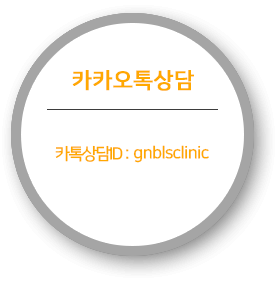
<style>
.page{position:relative;width:280px;height:284px;background:#ffffff}
.page>*{position:absolute;margin:0}
.t1{font:21.8px "NanumSquareB";color:#ffa800;font-weight:bold}
.t2{font:21.8px "NanumSquareB";font-weight:bold}
.t3{font:16.8px "NanumSquareB";letter-spacing:-0.1em;color:#ffa800}
.t4{font:16.8px "NanumSquareB";letter-spacing:-0.04em;color:#ffa800}
</style>
<div class="page">
<p class="t1" style="left:72px;top:70px;width:122px;height:21px">카카오톡상담</p>
<p class="t2" style="left:92px;top:70px;width:81px;height:21px">진료시간</p>
<p class="t3" style="left:55px;top:145px;width:74px;height:17px">카톡상담ID :</p>
<p class="t4" style="left:133px;top:145px;width:76px;height:18px">gnblsclinic</p>
</div>
